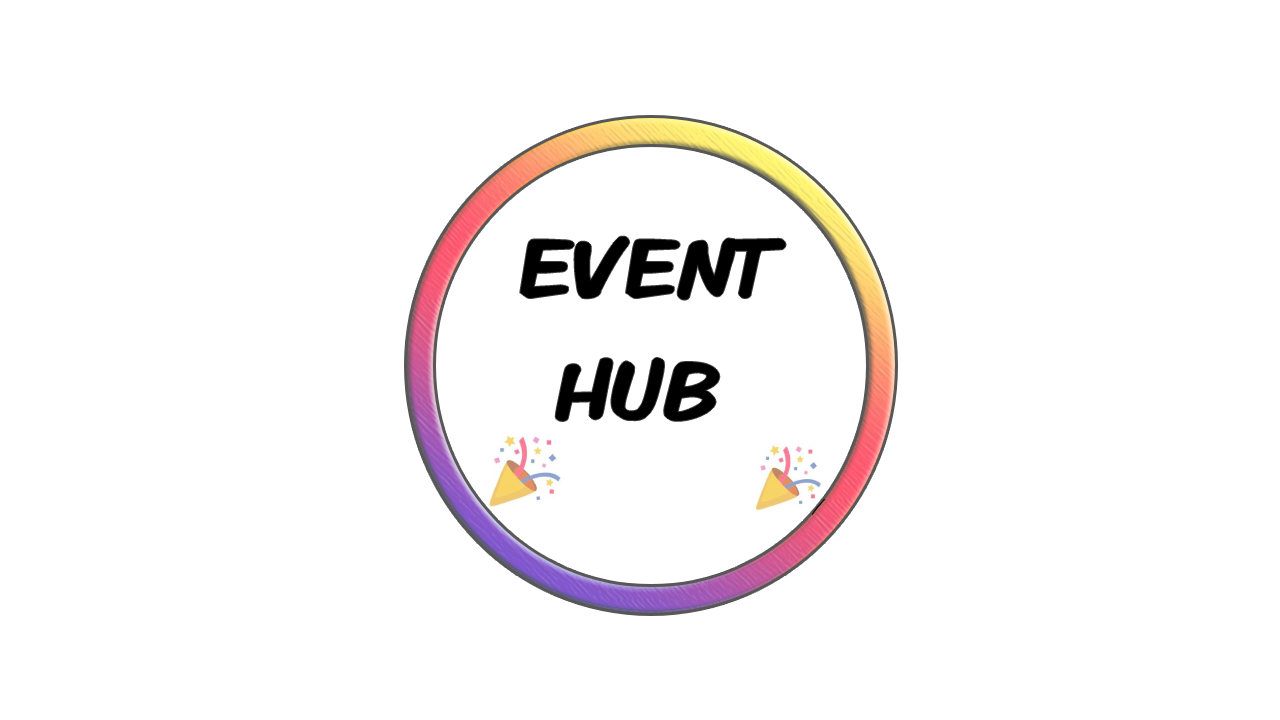
<style>
.page{position:relative;width:1280px;height:720px;background:#ffffff}
.page>*{position:absolute;margin:0}
.t1{font:101px "KomikaDisplayKaps";color:#000000}
</style>
<div class="page">
<p class="t1" style="left:520px;top:236px;width:266px;height:185px">event<br> hub</p>
</div>
